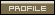
<style>
.page{position:relative;width:55px;height:15px;background:#776b4a}
.page>*{position:absolute;margin:0}
.t1{font:8px "BitDustTwo";color:#dedacf}
</style>
<div class="page">
<p class="t1" style="left:9px;top:6px;width:37px;height:5px">PROFILE</p>
</div>
